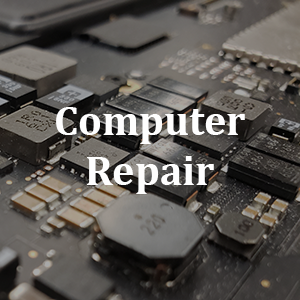
<style>
.page{position:relative;width:300px;height:300px}
.page>*{position:absolute;margin:0}
.t1{font:42px "Cambria-Bold";color:#fefefe}
</style>
<div class="page">
<p class="t1" style="left:56px;top:107px;width:189px;height:87px;text-align:center">Computer<br>Repair</p>
</div>
